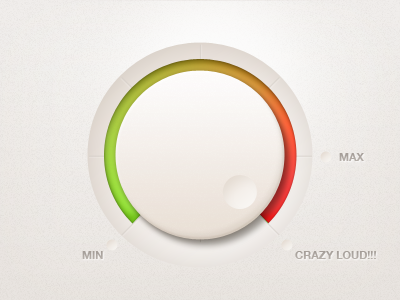
<style>
.page{position:relative;width:400px;height:300px}
.page>*{position:absolute;margin:0}
.t1{font:11px "HelveticaNeueCE-Bold";color:#b1aaa4;text-transform:uppercase}
</style>
<div class="page">
<p class="t1" style="left:339px;top:153px;width:25px;height:8px">MAX</p>
<p class="t1" style="left:82px;top:251px;width:21px;height:8px">Min</p>
<p class="t1" style="left:295px;top:251px;width:81px;height:8px">crazy LOUD!!!</p>
</div>
